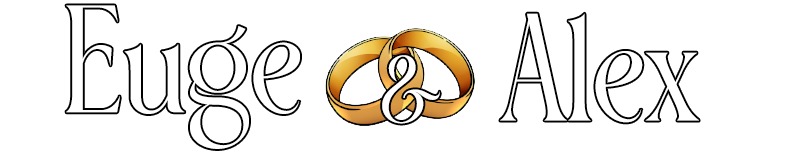
<style>
.page{position:relative;width:800px;height:154px;background:#ffffff}
.page>*{position:absolute;margin:0}
.t1{font:152px "FRISTARegular";letter-spacing:-0.01em;color:#ffffff}
.t2{font:93.8px "FRISTARegular";letter-spacing:-0.01em;color:#ffffff}
</style>
<div class="page">
<p class="t1" style="left:500px;top:13px;width:199px;height:110px">Alex</p>
<p class="t2" style="left:382px;top:55px;width:58px;height:69px">&amp;</p>
</div>
